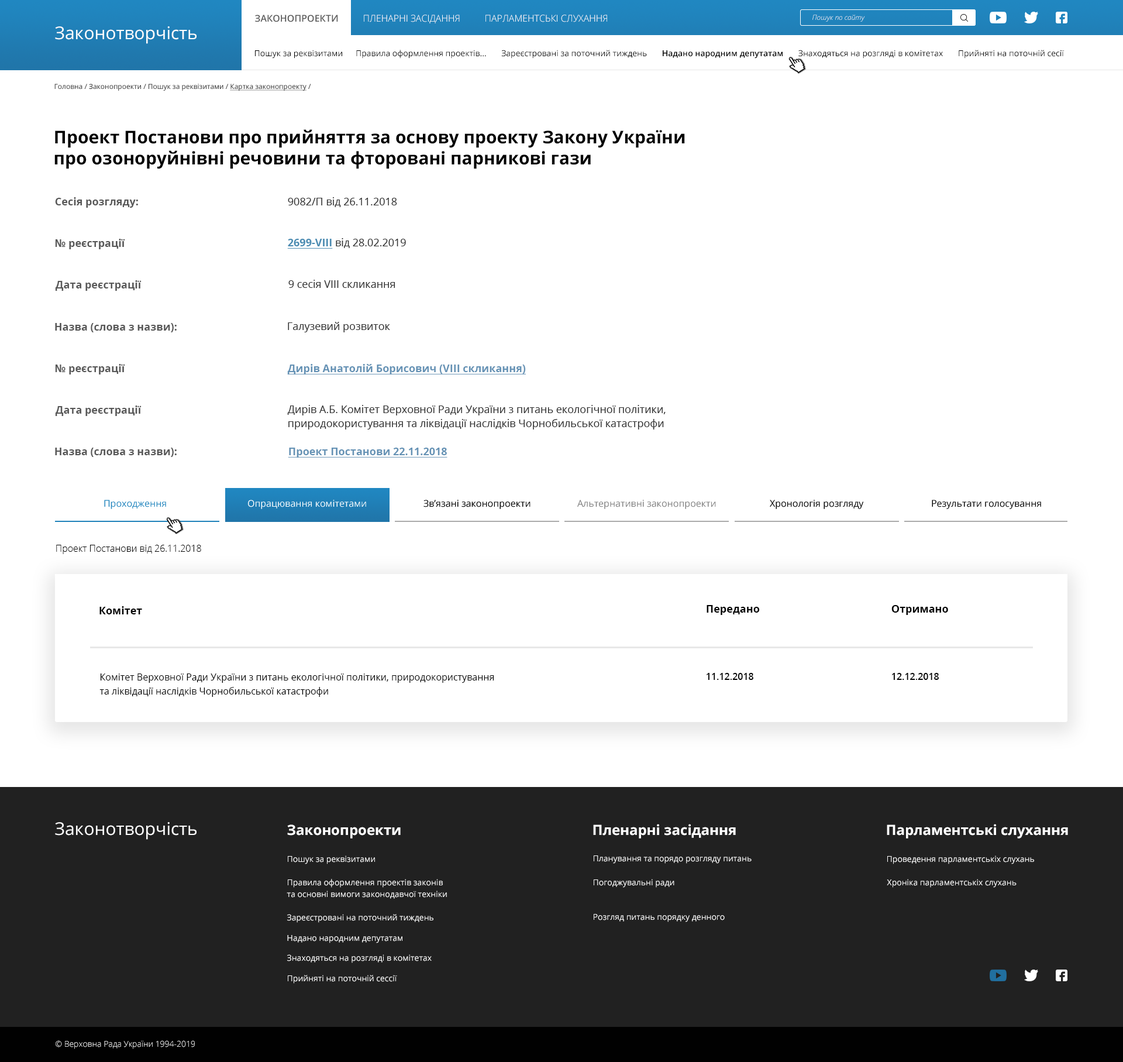
<style>
.page{position:relative;width:1123px;height:1062px;background:#ffffff}
.page>*{position:absolute;margin:0}
.t1{font:9.4px "OpenSans-SemiBold";color:#585858;text-transform:uppercase}
.t2{font:9.4px "OpenSans-Light";color:#ffffff;text-transform:uppercase}
.t3{font:7px "OpenSans-LightItalic";color:#ffffff}
.t4{font:17.5px "OpenSans-Regular";color:#ffffff}
.t5{font:8.2px "OpenSans-Regular";color:#000000}
.t6{font:8.2px "OpenSans-SemiBold";color:#000000}
.t7{font:7px "OpenSans";color:#333333}
.t8{font:7px "OpenSans";color:#333333;text-decoration:underline}
.t9{font:17.5px "OpenSans-Bold";color:#000000}
.t10{font:10.5px "OpenSans-Bold";color:#585858}
.t11{font:10.5px "OpenSans";color:#333333}
.t12{font:10.5px "OpenSans"}
.t13{font:10.5px "OpenSans-Bold";text-decoration:underline}
.t14{font:10.5px "OpenSans-Bold";color:#6592b5;text-decoration:underline}
.t15{font:10.5px/14px "OpenSans";color:#333333}
.t16{font:9.4px "OpenSans";color:#2084bd}
.t17{font:9.4px "OpenSans";color:#ffffff}
.t18{font:9.4px "OpenSans";color:#000000}
.t19{font:9.4px "OpenSans";color:#7f7f7f}
.t20{font:9.4px "OpenSans-Light";color:#000000}
.t21{font:10.5px "OpenSans-Bold";color:#000000}
.t22{font:9.4px/14px "OpenSans-Regular";color:#000000}
.t23{font:9.4px "OpenSans-SemiBold";color:#000000}
.t24{font:14px "OpenSans-Bold";color:#ffffff}
.t25{font:8.2px "OpenSans-Regular";color:#ffffff}
.t26{font:8.2px/11.7px "OpenSans-Regular";color:#ffffff}
.t27{font:8.2px/15.2px "OpenSans-Regular";color:#ffffff}
.t28{font:8.2px "OpenSans-Light";color:#ffffff}
</style>
<div class="page">
<p class="t1" style="left:255px;top:15px;width:83px;height:7px">Законопроекти</p>
<p class="t2" style="left:364px;top:15px;width:96px;height:8px">пленарні засідання</p>
<p class="t2" style="left:486px;top:15px;width:121px;height:7px">парламентські слухання</p>
<p class="t3" style="left:813px;top:15px;width:52px;height:7px">Пошук по сайту</p>
<p class="t4" style="left:55px;top:26px;width:142px;height:18px">Законотворчість</p>
<p class="t5" style="left:255px;top:50px;width:809px;height:8px">Пошук за реквізитами      Правила оформлення проектів...       Зареєстровані за поточний тиждень       <span class="t6">Надано народним депутатам</span>       Знаходяться на розгляді в комітетах       Прийняті на поточній сесії</p>
<p class="t7" style="left:54px;top:84px;width:257px;height:7px">Головна / Законопроекти / Пошук за реквізитами / <span class="t8">Картка законопроекту</span> /</p>
<p class="t9" style="left:54px;top:129px;width:631px;height:40px">Проект Постанови про прийняття за основу проекту Закону України <br>про озоноруйнівні речовини та фторовані парникові гази</p>
<p class="t10" style="left:55px;top:197px;width:83px;height:11px">Сесія розгляду:</p>
<p class="t11" style="left:288px;top:197px;width:109px;height:10px">9082/П від 26.11.2018</p>
<p class="t10" style="left:55px;top:239px;width:70px;height:10px">№ реєстрацiї</p>
<p class="t12" style="left:287px;top:238px;width:119px;height:11px"><span class="t13">2699-VIII</span> від 28.02.2019</p>
<p class="t10" style="left:55px;top:280px;width:87px;height:11px">Дата реєстрацiї</p>
<p class="t11" style="left:288px;top:280px;width:107px;height:8px">9 сесія VIII скликання</p>
<p class="t10" style="left:55px;top:323px;width:122px;height:9px">Назва (слова з назви):</p>
<p class="t11" style="left:288px;top:322px;width:102px;height:10px">Галузевий розвиток</p>
<p class="t10" style="left:55px;top:364px;width:70px;height:10px">№ реєстрацiї</p>
<p class="t14" style="left:287px;top:364px;width:239px;height:10px">Дирів Анатолій Борисович (VIII скликання)</p>
<p class="t10" style="left:55px;top:405px;width:87px;height:11px">Дата реєстрацiї</p>
<p class="t15" style="left:287px;top:405px;width:379px;height:24px">Дирів А.Б. Комітет Верховної Ради України з питань екологічної політики, <br>природокористування та ліквідації наслідків Чорнобильської катастрофи</p>
<p class="t10" style="left:55px;top:447px;width:122px;height:10px">Назва (слова з назви):</p>
<p class="t14" style="left:288px;top:447px;width:159px;height:10px">Проект Постанови 22.11.2018</p>
<p class="t16" style="left:104px;top:500px;width:62px;height:9px">Проходження</p>
<p class="t17" style="left:248px;top:500px;width:118px;height:9px">Опрацювання комітетами</p>
<p class="t18" style="left:424px;top:500px;width:107px;height:9px">Зв’язані законопроекти</p>
<p class="t19" style="left:577px;top:500px;width:139px;height:9px">Альтернативні законопроекти</p>
<p class="t18" style="left:770px;top:500px;width:94px;height:9px">Хронологія розгляду</p>
<p class="t18" style="left:932px;top:500px;width:109px;height:9px">Результати голосування</p>
<p class="t20" style="left:56px;top:545px;width:145px;height:9px">Проект Постанови від 26.11.2018</p>
<p class="t21" style="left:707px;top:605px;width:53px;height:10px">Передано</p>
<p class="t21" style="left:891px;top:605px;width:57px;height:10px">Отримано</p>
<p class="t21" style="left:99px;top:606px;width:43px;height:8px">Комітет</p>
<p class="t22" style="left:99px;top:673px;width:395px;height:24px">Комітет Верховної Ради України з питань екологічної політики, природокористування <br>та ліквідації наслідків Чорнобильської катастрофи</p>
<p class="t23" style="left:707px;top:673px;width:46px;height:7px">11.12.2018</p>
<p class="t23" style="left:892px;top:673px;width:47px;height:7px">12.12.2018</p>
<p class="t4" style="left:55px;top:822px;width:142px;height:17px">Законотворчість</p>
<p class="t24" style="left:287px;top:824px;width:114px;height:14px">Законопроекти</p>
<p class="t24" style="left:593px;top:824px;width:143px;height:14px">Пленарні засідання</p>
<p class="t24" style="left:887px;top:824px;width:181px;height:14px">Парламентські слухання</p>
<p class="t25" style="left:288px;top:855px;width:87px;height:9px">Пошук за реквізитами</p>
<p class="t25" style="left:594px;top:855px;width:158px;height:8px">Планування та порядо розгляду питань</p>
<p class="t25" style="left:887px;top:855px;width:147px;height:9px">Проведення парламентськіх слухань</p>
<p class="t26" style="left:287px;top:879px;width:160px;height:20px"><span class="t27">Правила оформлення проектів законів<br></span>та основні вимоги законодавчої техніки</p>
<p class="t25" style="left:594px;top:879px;width:80px;height:8px">Погоджувальні ради</p>
<p class="t25" style="left:887px;top:879px;width:130px;height:8px">Хроніка парламентськіх слухань</p>
<p class="t25" style="left:287px;top:914px;width:146px;height:8px">Зареєстровані на поточний тиждень</p>
<p class="t25" style="left:594px;top:914px;width:131px;height:8px">Розгляд питань порядку денного</p>
<p class="t25" style="left:287px;top:935px;width:115px;height:8px">Надано народним депутатам</p>
<p class="t25" style="left:287px;top:954px;width:145px;height:9px">Знаходяться на розгляді в комітетах</p>
<p class="t25" style="left:288px;top:975px;width:109px;height:8px">Прийняті на поточній сессії</p>
<p class="t28" style="left:56px;top:1040px;width:139px;height:9px">© Верховна Рада України 1994-2019</p>
</div>
